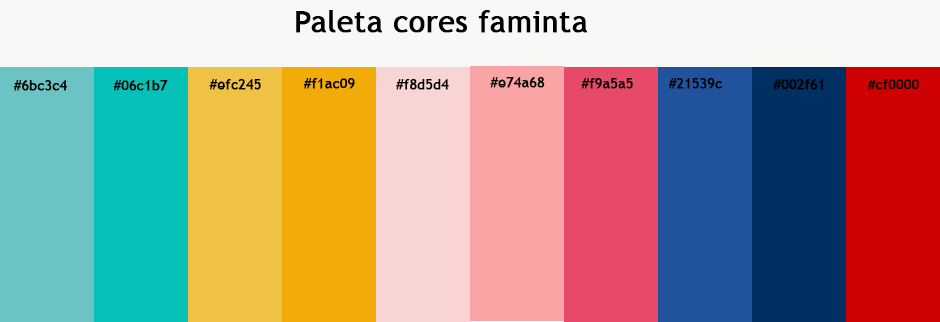
<style>
.page{position:relative;width:940px;height:322px}
.page>*{position:absolute;margin:0}
.t1{font:30px "TrebuchetMS";color:#000000;font-weight:bold}
.t2{font:14px "TrebuchetMS";color:#000000;font-weight:bold}
</style>
<div class="page">
<p class="t1" style="left:296px;top:10px;width:291px;height:23px">Paleta cores faminta</p>
<p class="t2" style="left:303px;top:78px;width:52px;height:11px">#f1ac09</p>
<p class="t2" style="left:490px;top:77px;width:55px;height:11px">#e74a68</p>
<p class="t2" style="left:581px;top:78px;width:52px;height:11px">#f9a5a5</p>
<p class="t2" style="left:668px;top:78px;width:54px;height:11px">#21539c</p>
<p class="t2" style="left:13px;top:80px;width:54px;height:11px">#6bc3c4</p>
<p class="t2" style="left:113px;top:80px;width:55px;height:11px">#06c1b7</p>
<p class="t2" style="left:209px;top:79px;width:52px;height:11px">#efc245</p>
<p class="t2" style="left:396px;top:79px;width:53px;height:11px">#f8d5d4</p>
<p class="t2" style="left:773px;top:79px;width:50px;height:11px">#002f61</p>
<p class="t2" style="left:867px;top:79px;width:52px;height:11px">#cf0000</p>
</div>
